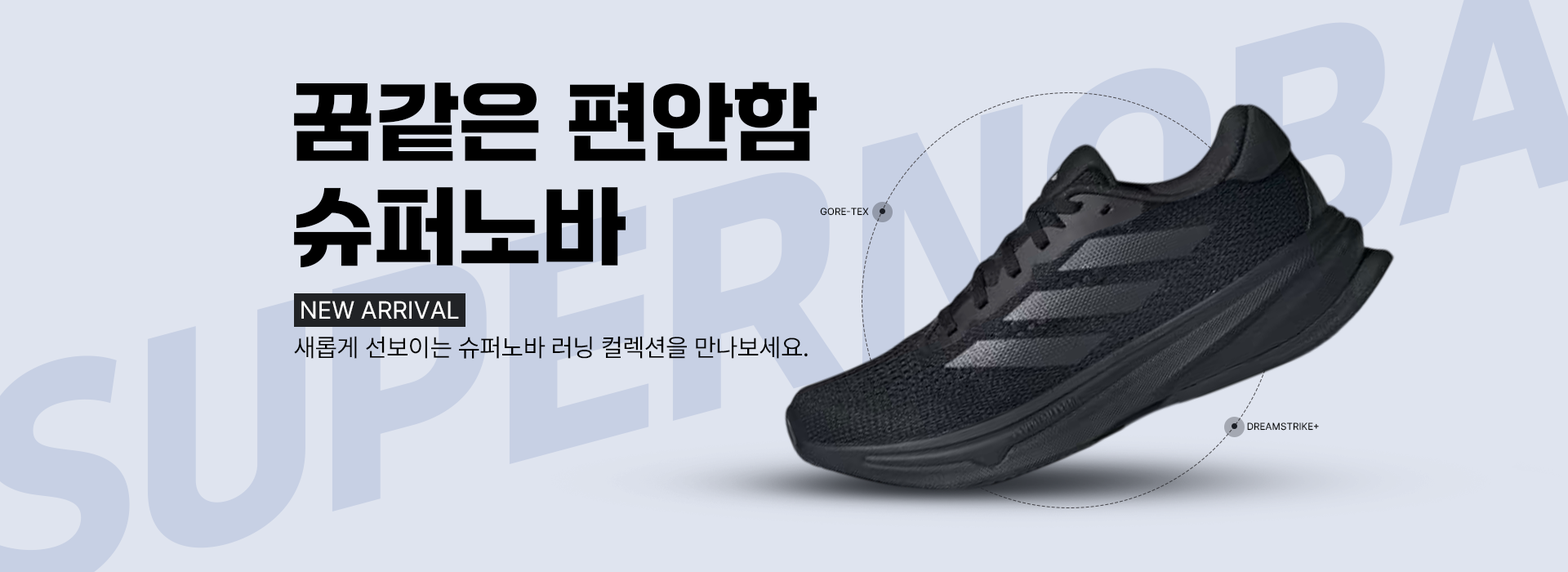
<style>
.page{position:relative;width:1568px;height:572px;background:#dfe4ef}
.page>*{position:absolute;margin:0}
.t1{font:83.7px "JalnanGothic";color:#000000}
.t2{font:9.8px "Pretendard-Regular";color:#000000;text-transform:uppercase}
.t3{font:24.5px "Pretendard-Regular";color:#ffffff;text-transform:uppercase}
.t4{font:25.1px "Pretendard-Regular";color:#000000}
</style>
<div class="page">
<p class="t1" style="left:294px;top:82px;width:523px;height:79px">꿈같은 편안함</p>
<p class="t1" style="left:294px;top:187px;width:332px;height:81px">슈퍼노바</p>
<p class="t2" style="left:820px;top:207px;width:49px;height:9px">GORE-TEX</p>
<p class="t3" style="left:301px;top:301px;width:158px;height:17px">new arrival</p>
<p class="t4" style="left:294px;top:336px;width:514px;height:23px">새롭게 선보이는 슈퍼노바 러닝 컬렉션을 만나보세요.</p>
<p class="t2" style="left:1247px;top:422px;width:72px;height:8px">DREAMSTRIKE+</p>
</div>
